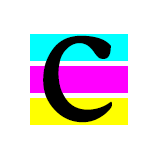
<style>
.page{position:relative;width:160px;height:160px;background:#ffffff}
.page>*{position:absolute;margin:0}
.t1{font:200px "CrimsonText-Roman";color:#000000}
</style>
<div class="page">
<p class="t1" style="left:43px;top:35px;width:69px;height:88px">c</p>
</div>
